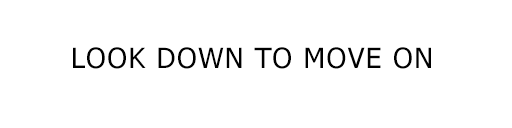
<style>
.page{position:relative;width:512px;height:128px;background:#ffffff}
.page>*{position:absolute;margin:0}
.t1{font:28px "Tahoma";letter-spacing:0.05em;color:#000000}
</style>
<div class="page">
<p class="t1" style="left:73px;top:47px;width:358px;height:22px">LOOK DOWN TO MOVE ON</p>
</div>
